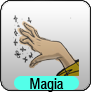
<style>
.page{position:relative;width:92px;height:92px}
.page>*{position:absolute;margin:0}
.t1{font:14.7px "Swiss721BT-RomanCondensed";color:#000000}
</style>
<div class="page">
<p class="t1" style="left:30px;top:78px;width:34px;height:14px">Magia</p>
</div>
